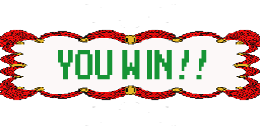
<style>
.page{position:relative;width:260px;height:130px;background:#ffffff}
.page>*{position:absolute;margin:0}
.t1{font:33.3px "MegaMan-2";color:#179435;scale:0.59 1}
</style>
<div class="page">
<p class="t1" style="left:58px;top:50px;width:149px;height:30px">you win!!</p>
</div>
